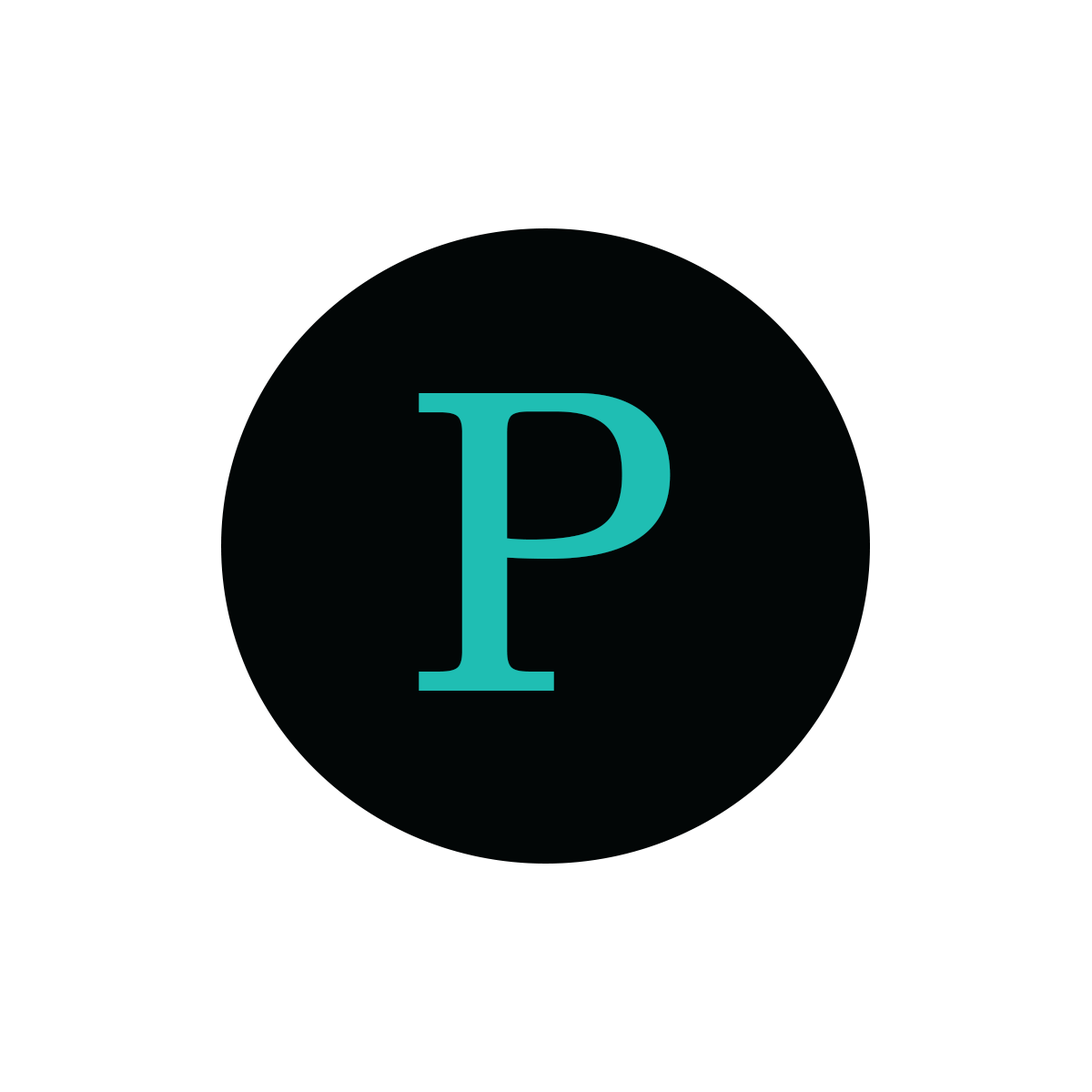
<style>
.page{position:relative;width:1092px;height:1092px;background:#ffffff}
.page>*{position:absolute;margin:0}
.t1{font:411.5px "CenturySchlbkCyrillicBT-Roman";color:#1fbeb3}
</style>
<div class="page">
<p class="t1" style="left:419px;top:393px;width:252px;height:298px">P</p>
</div>
